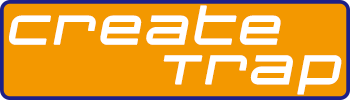
<style>
.page{position:relative;width:350px;height:100px;background:#f39800}
.page>*{position:absolute;margin:0}
.t1{font:50px/39.6px "ChangelingNeo";letter-spacing:0.1em;color:#ffffff;font-weight:bold;font-style:italic}
</style>
<div class="page">
<p class="t1" style="left:9px;top:5px;width:333px;height:90px;text-align:right">Create<br>Trap</p>
</div>
